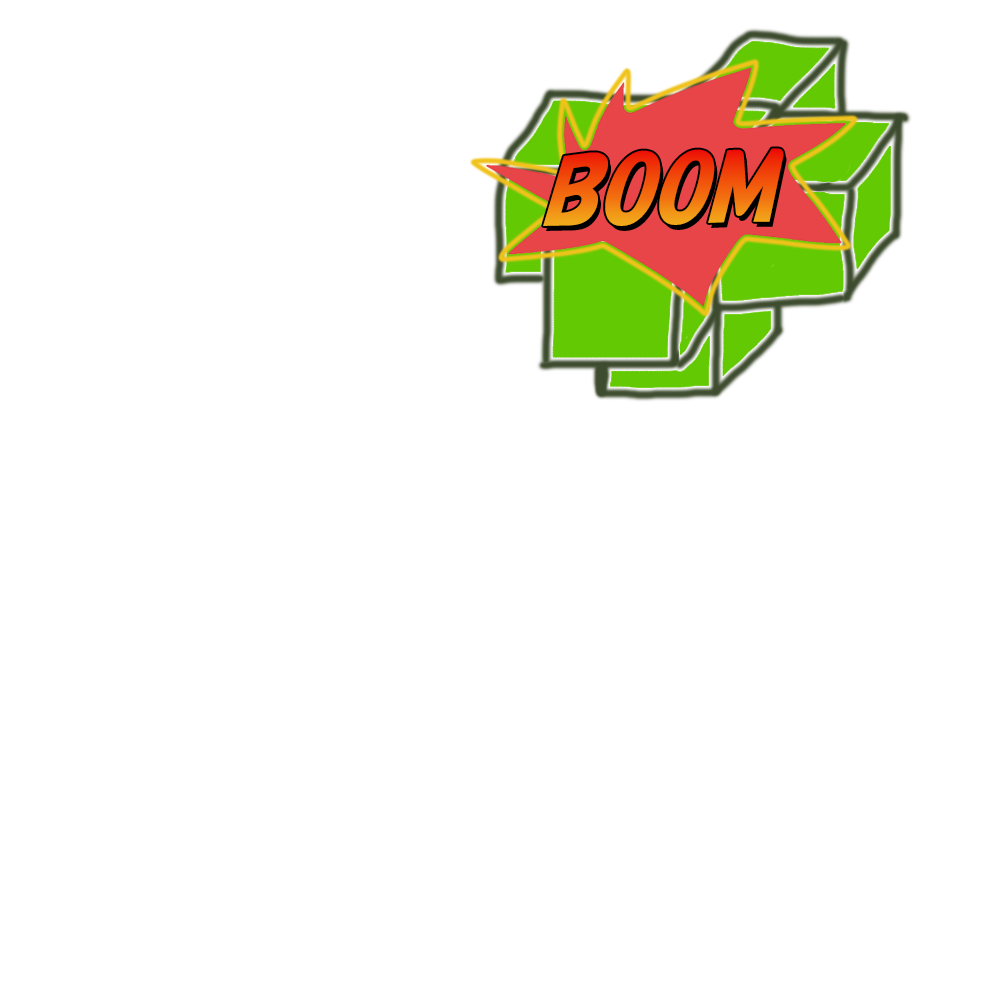
<style>
.page{position:relative;width:1000px;height:1000px;background:#ffffff}
.page>*{position:absolute;margin:0}
.t1{font:93px "HGPSoeiKakupoptai";scale:0.97 1}
</style>
<div class="page">
<p class="t1" style="left:543px;top:148px;width:241px;height:78px;rotate:-1deg">BOOM</p>
</div>
